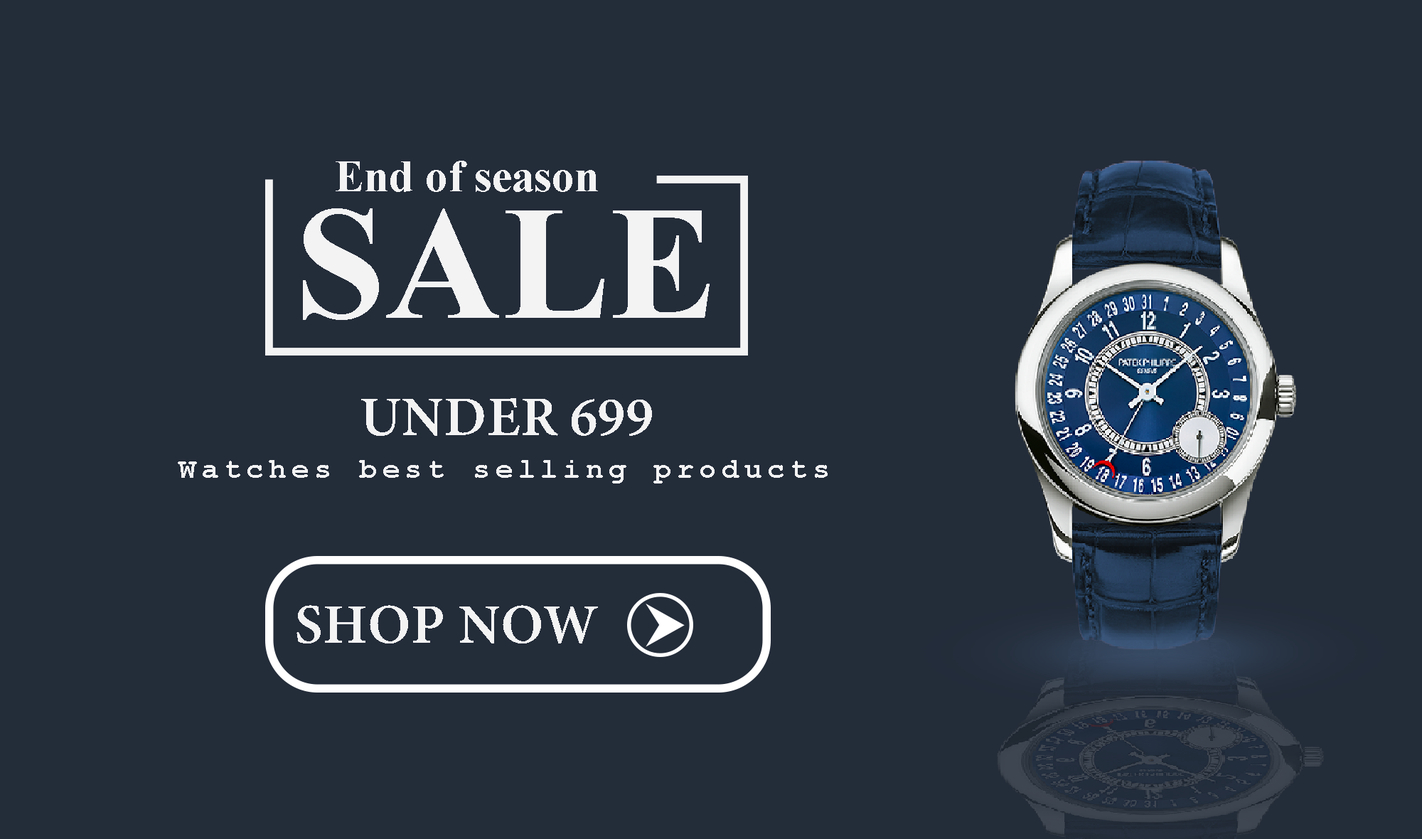
<style>
.page{position:relative;width:1422px;height:839px;background:#232c39}
.page>*{position:absolute;margin:0}
.t1{font:45px "TimesNewRomanPS-BoldMT";color:#f3f3f4}
.t2{font:161.4px "TimesNewRomanPS-BoldMT";color:#f3f3f4}
.t3{font:56.3px "MinionConceptRoman-Semibold";color:#f3f3f4}
.t4{font:28.3px "CourierNewPS-BoldMT";letter-spacing:0.2em;color:#f3f3f4}
</style>
<div class="page">
<p class="t1" style="left:336px;top:161px;width:262px;height:31px">End of season</p>
<p class="t2" style="left:303px;top:208px;width:406px;height:112px">SALE</p>
<p class="t3" style="left:361px;top:398px;width:291px;height:38px">UNDER 699</p>
<p class="t4" style="left:178px;top:460px;width:649px;height:23px">Watches best selling products</p>
<p class="t3" style="left:296px;top:605px;width:302px;height:38px">SHOP NOW</p>
</div>
